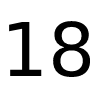
<style>
.page{position:relative;width:100px;height:100px;background:#ffffff}
.page>*{position:absolute;margin:0}
.t1{font:74px "DejaVuSans";color:#000000}
</style>
<div class="page">
<p class="t1" style="left:9px;top:21px;width:82px;height:57px">18</p>
</div>
